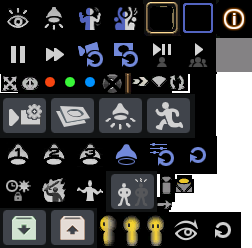
<style>
.page{position:relative;width:252px;height:248px;background:#000000}
.page>*{position:absolute;margin:0}
.t1{font:16px "H2gtrE";letter-spacing:-0.05em;color:#ffffff}
</style>
<div class="page">
<p class="t1" style="left:233px;top:13px;width:3px;height:12px">i</p>
</div>
